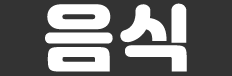
<style>
.page{position:relative;width:232px;height:76px;background:#333333}
.page>*{position:absolute;margin:0}
.t1{font:72px "Jalnan";letter-spacing:0.05em;color:#ffffff;text-transform:uppercase}
</style>
<div class="page">
<p class="t1" style="left:45px;top:3px;width:142px;height:69px">음식</p>
</div>
